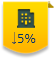
<style>
.page{position:relative;width:54px;height:60px}
.page>*{position:absolute;margin:0}
.t1{font:12px "NanumGothic";letter-spacing:-0.02em;color:#00355f}
</style>
<div class="page">
<p class="t1" style="left:12px;top:32px;width:24px;height:12px">↓5%</p>
</div>
